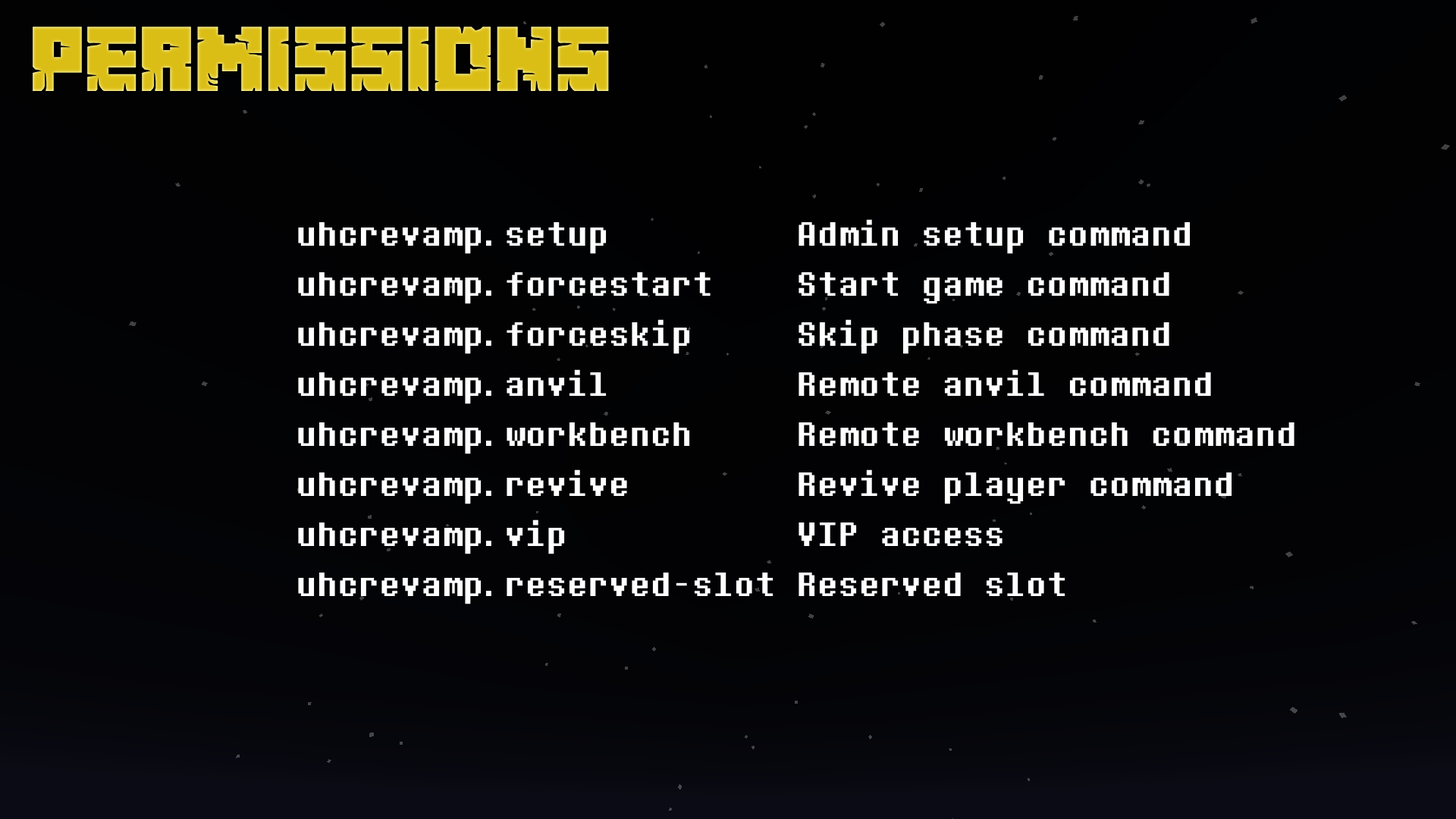
<style>
.page{position:relative;width:1456px;height:819px}
.page>*{position:absolute;margin:0}
.t1{font:81.9px "MinecrafterAlt";color:#dbbe15}
.t2{font:41.7px "DeterminationMonoWeb";color:#ffffff}
</style>
<div class="page">
<p class="t1" style="left:33px;top:27px;width:576px;height:64px">permissions</p>
<p class="t2" style="left:298px;top:219px;width:996px;height:385px">uhcrevamp.setup         Admin setup command<br>uhcrevamp.forcestart    Start game command<br>uhcrevamp.forceskip     Skip phase command<br>uhcrevamp.anvil         Remote anvil command<br>uhcrevamp.workbench     Remote workbench command<br>uhcrevamp.revive        Revive player command<br>uhcrevamp.vip           VIP access<br>uhcrevamp.reserved-slot Reserved slot</p>
</div>
